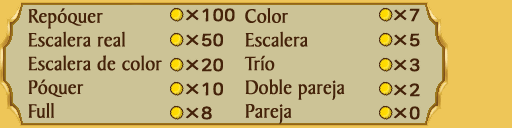
<style>
.page{position:relative;width:512px;height:128px;background:#ccc396}
.page>*{position:absolute;margin:0}
.t1{font:20.7px/23.8px "BakerSignetBT-Roman";color:#45230a;font-weight:bold;scale:0.96 1}
</style>
<div class="page">
<p class="t1" style="left:28px;top:8px;width:134px;height:110px">Repóquer<br>Escalera real<br>Escalera de color<br>Póquer<br>Full</p>
<p class="t1" style="left:244px;top:8px;width:101px;height:116px">Color<br>Escalera<br>Trío<br>Doble pareja<br>Pareja</p>
</div>
